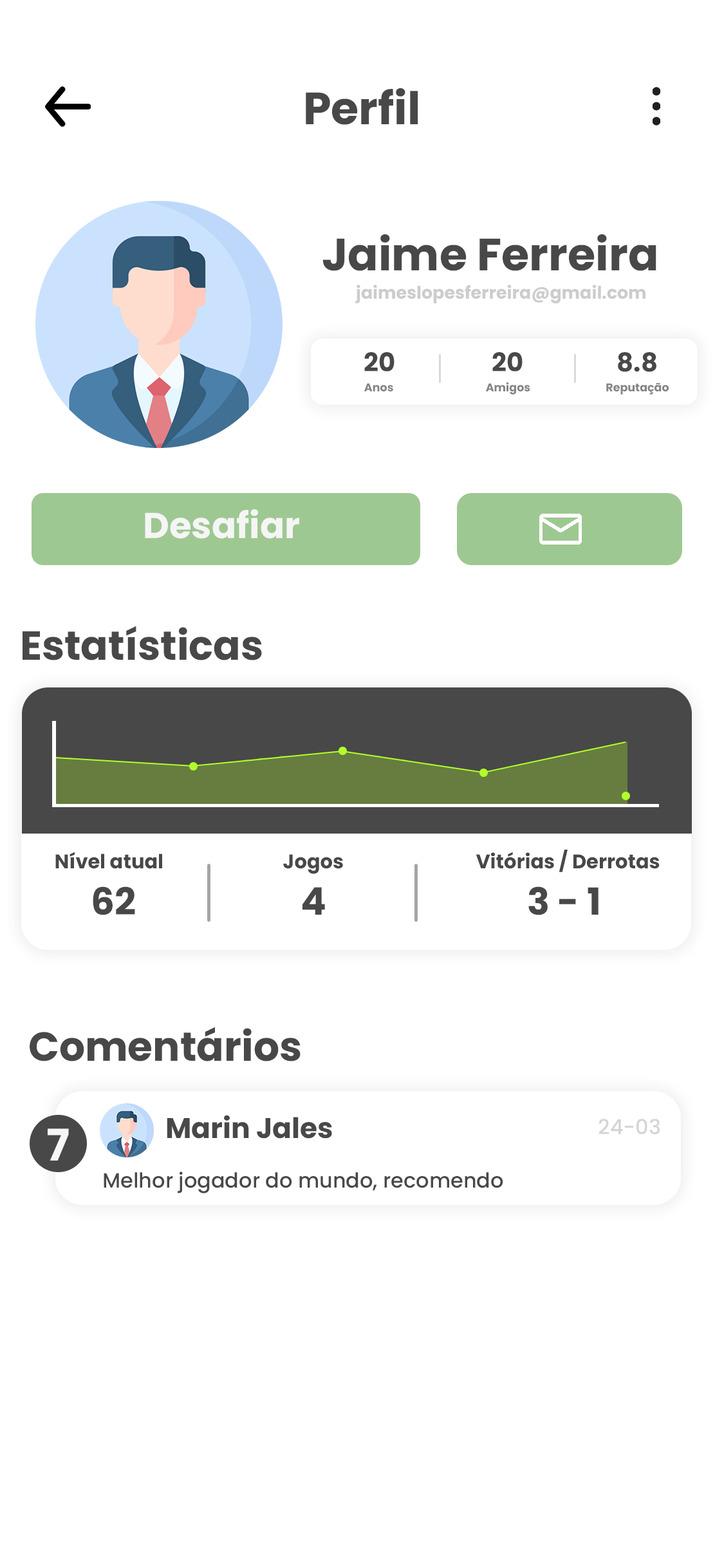
<style>
.page{position:relative;width:724px;height:1568px;background:#ffffff}
.page>*{position:absolute;margin:0}
.t1{font:45.1px "Poppins-Bold";color:#484848}
.t2{font:17.3px "Poppins-Bold";color:#cccccc}
.t3{font:25.8px "Poppins-Bold";color:#484848}
.t4{font:11.2px "Poppins-Bold";color:#848484}
.t5{font:36px "Poppins-Bold";color:#f5f5f5}
.t6{font:40.6px "Poppins-Bold";color:#484848}
.t7{font:19.6px "Poppins-Bold";color:#484848}
.t8{font:37.3px "Poppins-Bold";color:#484848}
.t9{font:38px "Poppins-Bold";color:#484848}
.t10{font:28.3px "Poppins-Bold";color:#484848}
.t11{font:20.6px "Poppins-Medium";color:#d5d5d5}
.t12{font:43.6px "Poppins-Bold";color:#f7f7f7}
.t13{font:20.6px "Poppins-Medium";color:#484848}
</style>
<div class="page">
<p class="t1" style="left:306px;top:88px;width:112px;height:37px">Perfil</p>
<p class="t1" style="left:322px;top:234px;width:335px;height:37px">Jaime Ferreira</p>
<p class="t2" style="left:355px;top:285px;width:291px;height:19px">jaimeslopesferreira@gmail.com</p>
<p class="t3" style="left:364px;top:352px;width:31px;height:19px">20</p>
<p class="t3" style="left:492px;top:352px;width:31px;height:19px">20</p>
<p class="t3" style="left:618px;top:352px;width:39px;height:20px">8.8</p>
<p class="t4" style="left:364px;top:383px;width:29px;height:9px">Anos</p>
<p class="t4" style="left:486px;top:382px;width:44px;height:13px">Amigos</p>
<p class="t4" style="left:606px;top:382px;width:63px;height:13px">Reputação</p>
<p class="t5" style="left:145px;top:509px;width:154px;height:30px">Desafiar</p>
<p class="t6" style="left:23px;top:626px;width:239px;height:34px">Estatísticas</p>
<p class="t7" style="left:55px;top:852px;width:107px;height:17px">Nível atual</p>
<p class="t7" style="left:283px;top:854px;width:60px;height:20px">Jogos</p>
<p class="t7" style="left:476px;top:850px;width:184px;height:22px">Vitórias / Derrotas</p>
<p class="t8" style="left:93px;top:886px;width:42px;height:29px">62</p>
<p class="t9" style="left:303px;top:887px;width:22px;height:28px">4</p>
<p class="t8" style="left:528px;top:886px;width:71px;height:29px">3 - 1</p>
<p class="t6" style="left:30px;top:1027px;width:271px;height:34px">Comentários</p>
<p class="t10" style="left:167px;top:1115px;width:165px;height:24px">Marin Jales</p>
<p class="t11" style="left:599px;top:1119px;width:61px;height:16px">24-03</p>
<p class="t12" style="left:48px;top:1128px;width:21px;height:33px">7</p>
<p class="t13" style="left:104px;top:1171px;width:399px;height:22px">Melhor jogador do mundo, recomendo</p>
</div>
